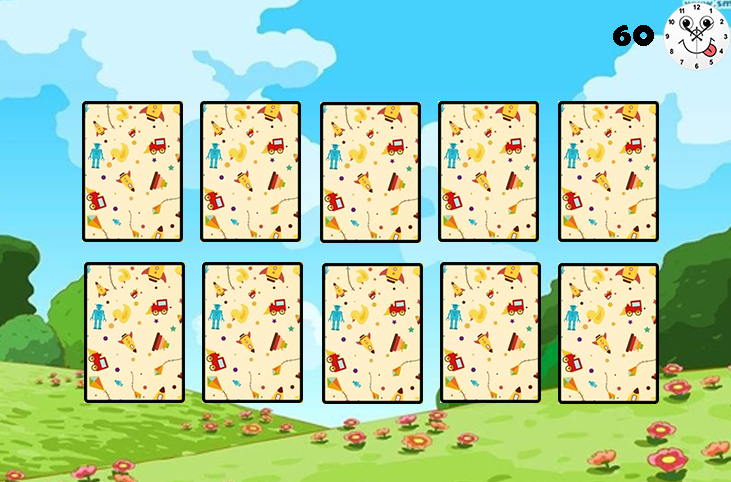
<style>
.page{position:relative;width:731px;height:482px}
.page>*{position:absolute;margin:0}
.t1{font:36px "BerlinSansFBDemi-Bold";color:#000000}
</style>
<div class="page">
<p class="t1" style="left:613px;top:25px;width:41px;height:21px">60</p>
</div>
